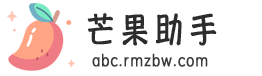
<style>
.page{position:relative;width:262px;height:76px;background:#ffffff}
.page>*{position:absolute;margin:0}
.t1{font:33.6px "HannotateSC-W7";letter-spacing:0.2em;color:#2c2c2c;font-weight:bold;scale:0.83 1}
.t2{font:16.8px "STYuanti-SC-Regular";letter-spacing:0.075em;color:#393939;font-weight:bold;scale:0.83 1}
</style>
<div class="page">
<p class="t1" style="left:87px;top:13px;width:130px;height:33px">芒果助手</p>
<p class="t2" style="left:92px;top:53px;width:116px;height:14px">abc.rmzbw.com</p>
</div>
